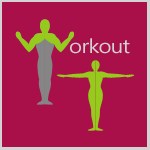
<style>
.page{position:relative;width:150px;height:150px;background:#a91049}
.page>*{position:absolute;margin:0}
.t1{font:20px "SegoeUI";letter-spacing:-0.025em;color:#d3d3d3;scale:1.1 1}
</style>
<div class="page">
<p class="t1" style="left:70px;top:38px;width:60px;height:16px">orkout</p>
</div>
